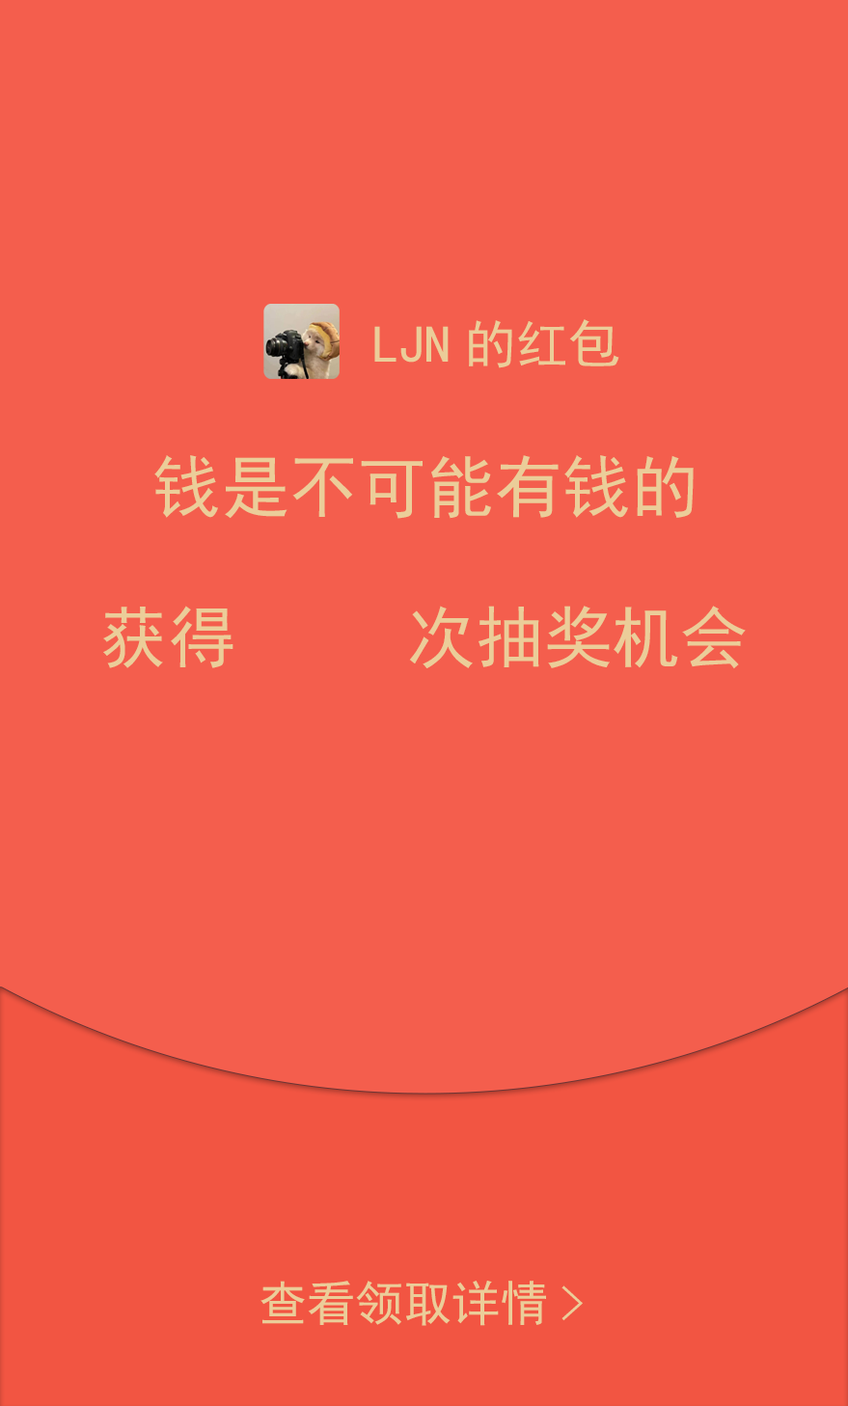
<style>
.page{position:relative;width:848px;height:1406px;background:#f45e4d}
.page>*{position:absolute;margin:0}
.t1{font:52.2px "SimHei";color:#ebcd99}
.t2{font:68.3px "SimHei";color:#ebcd99}
.t3{font:48.2px "SimHei";color:#ebcd99}
</style>
<div class="page">
<p class="t1" style="left:374px;top:319px;width:245px;height:49px">LJN的红包</p>
<p class="t2" style="left:154px;top:455px;width:540px;height:64px">钱是不可能有钱的</p>
<p class="t2" style="left:103px;top:606px;width:643px;height:63px">获得     次抽奖机会</p>
<p class="t3" style="left:260px;top:1281px;width:323px;height:45px">查看领取详情&gt;</p>
</div>
